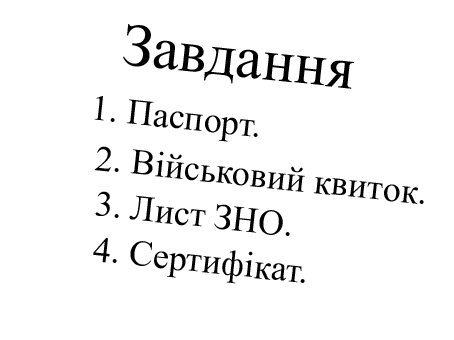
<style>
.page{position:relative;width:454px;height:340px;background:#ffffff}
.page>*{position:absolute;margin:0}
.t1{font:60px "TimesNewRomanPSMT";color:#000000}
.t2{font:36px "TimesNewRomanPSMT";color:#000000}
</style>
<div class="page">
<p class="t1" style="left:123px;top:24px;width:231px;height:65px;rotate:6deg">Завдання</p>
<p class="t2" style="left:94px;top:96px;width:164px;height:46px;rotate:6deg">1. Паспорт.</p>
<p class="t2" style="left:94px;top:146px;width:330px;height:58px;rotate:6deg">2. Військовий квиток.</p>
<p class="t2" style="left:95px;top:191px;width:195px;height:45px;rotate:6deg">3. Лист ЗНО.</p>
<p class="t2" style="left:93px;top:238px;width:212px;height:46px;rotate:6deg">4. Сертифікат.</p>
</div>
